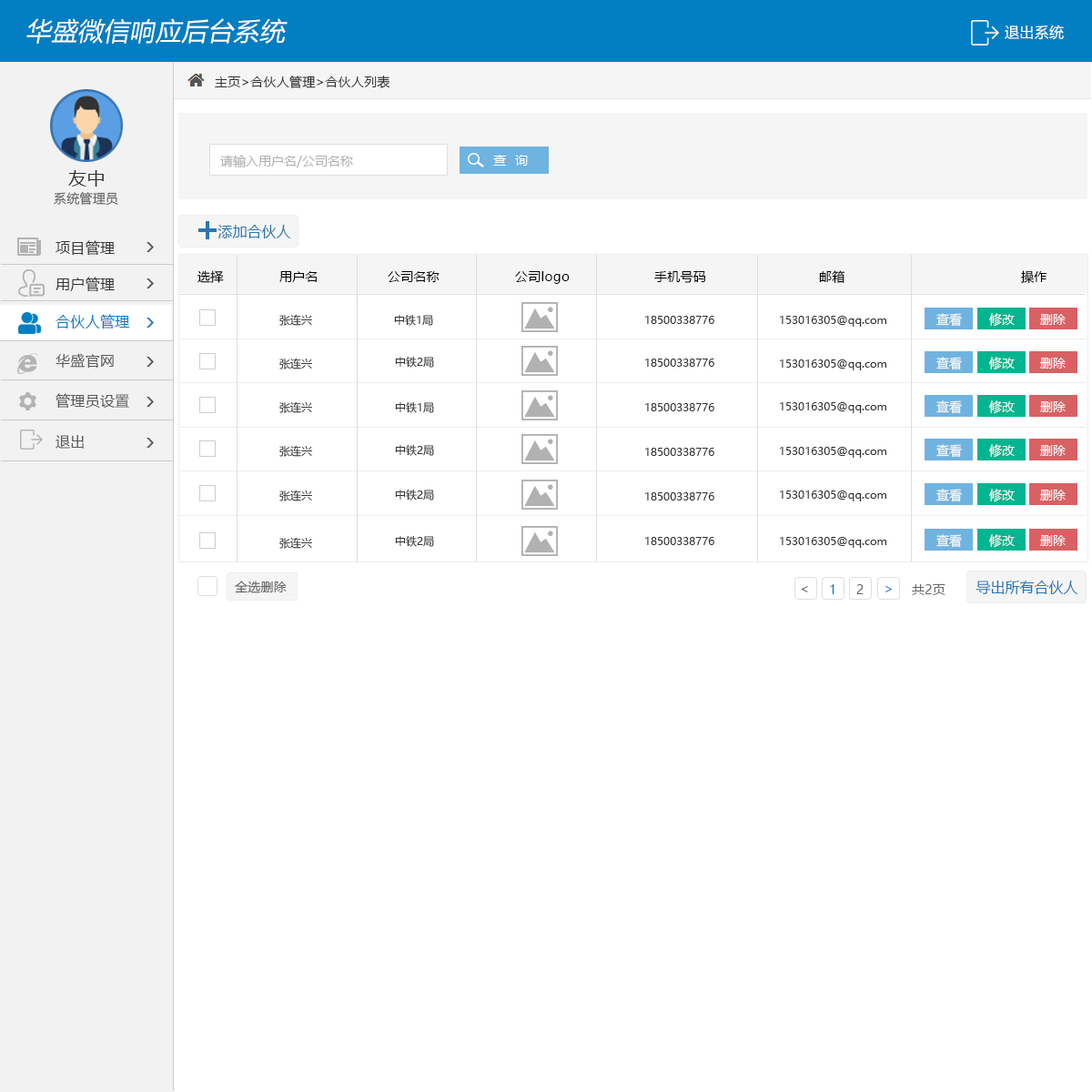
<style>
.page{position:relative;width:1092px;height:1092px;background:#ffffff}
.page>*{position:absolute;margin:0}
.t1{font:25.5px "MicrosoftYaHei";letter-spacing:0.02em;color:#ffffff;font-style:italic}
.t2{font:14.6px "MicrosoftYaHei";letter-spacing:0.02em;color:#ffffff}
.t3{font:12.7px "MicrosoftYaHei";letter-spacing:0.02em;color:#333333}
.t4{font:12.7px "MicrosoftYaHei";color:#b1b1b1}
.t5{font:18.2px "MicrosoftYaHei";letter-spacing:0.02em;color:#333333}
.t6{font:12.7px "MicrosoftYaHei";letter-spacing:0.02em;color:#666666}
.t7{font:14.6px "MicrosoftYaHei";color:#2977b3}
.t8{font:14.6px "MicrosoftYaHei";letter-spacing:0.02em;color:#333333}
.t9{font:12.7px "MicrosoftYaHei";letter-spacing:0.02em;color:#000000}
.t10{font:14.6px "MicrosoftYaHei";letter-spacing:0.02em;color:#017ec1}
.t11{font:10.9px "MicrosoftYaHei";color:#333333}
.t12{font:12.7px "MicrosoftYaHei";color:#f5f5f5}
.t13{font:14.6px "MicrosoftYaHei";letter-spacing:0.02em;color:#585858}
.t14{font:12.7px "MicrosoftYaHei";letter-spacing:0.02em;color:#017ec1}
.t15{font:13.1px "MicrosoftYaHei";letter-spacing:0.02em;color:#017ec1}
</style>
<div class="page">
<p class="t1" style="left:26px;top:18px;width:262px;height:26px">华盛微信响应后台系统</p>
<p class="t2" style="left:1005px;top:25px;width:59px;height:15px">退出系统</p>
<p class="t3" style="left:215px;top:76px;width:175px;height:12px">主页&gt;合伙人管理&gt;合伙人列表</p>
<p class="t4" style="left:220px;top:155px;width:133px;height:13px">请输入用户名/公司名称</p>
<p class="t5" style="left:68px;top:170px;width:36px;height:17px">友中</p>
<p class="t6" style="left:54px;top:192px;width:64px;height:14px">系统管理员</p>
<p class="t7" style="left:217px;top:225px;width:74px;height:13px">添加合伙人</p>
<p class="t8" style="left:56px;top:240px;width:59px;height:15px">项目管理</p>
<p class="t8" style="left:56px;top:277px;width:59px;height:14px">用户管理</p>
<p class="t9" style="left:197px;top:270px;width:27px;height:13px">选择</p>
<p class="t9" style="left:279px;top:271px;width:38px;height:11px">用户名</p>
<p class="t9" style="left:388px;top:271px;width:52px;height:11px">公司名称</p>
<p class="t9" style="left:515px;top:271px;width:55px;height:13px">公司logo</p>
<p class="t9" style="left:654px;top:270px;width:52px;height:13px">手机号码</p>
<p class="t9" style="left:819px;top:270px;width:26px;height:13px">邮箱</p>
<p class="t9" style="left:1021px;top:270px;width:26px;height:14px">操作</p>
<p class="t10" style="left:56px;top:314px;width:74px;height:15px">合伙人管理</p>
<p class="t11" style="left:279px;top:314px;width:33px;height:12px">张连兴</p>
<p class="t11" style="left:394px;top:314px;width:39px;height:12px">中铁1局</p>
<p class="t11" style="left:645px;top:316px;width:69px;height:8px">18500338776</p>
<p class="t11" style="left:780px;top:316px;width:106px;height:11px">153016305@qq.com</p>
<p class="t12" style="left:936px;top:313px;width:26px;height:14px">查看</p>
<p class="t12" style="left:989px;top:313px;width:26px;height:14px">修改</p>
<p class="t12" style="left:1040px;top:314px;width:26px;height:11px">删除</p>
<p class="t13" style="left:56px;top:353px;width:58px;height:15px">华盛官网</p>
<p class="t11" style="left:279px;top:358px;width:33px;height:11px">张连兴</p>
<p class="t11" style="left:395px;top:356px;width:39px;height:12px">中铁2局</p>
<p class="t11" style="left:645px;top:359px;width:69px;height:8px">18500338776</p>
<p class="t11" style="left:780px;top:359px;width:106px;height:11px">153016305@qq.com</p>
<p class="t12" style="left:936px;top:357px;width:26px;height:13px">查看</p>
<p class="t12" style="left:989px;top:357px;width:26px;height:13px">修改</p>
<p class="t12" style="left:1040px;top:358px;width:26px;height:11px">删除</p>
<p class="t13" style="left:56px;top:393px;width:73px;height:16px">管理员设置</p>
<p class="t11" style="left:279px;top:401px;width:33px;height:12px">张连兴</p>
<p class="t11" style="left:395px;top:401px;width:39px;height:12px">中铁1局</p>
<p class="t12" style="left:936px;top:400px;width:26px;height:14px">查看</p>
<p class="t12" style="left:989px;top:400px;width:26px;height:14px">修改</p>
<p class="t12" style="left:1040px;top:401px;width:26px;height:11px">删除</p>
<p class="t11" style="left:645px;top:403px;width:69px;height:8px">18500338776</p>
<p class="t11" style="left:780px;top:402px;width:106px;height:11px">153016305@qq.com</p>
<p class="t13" style="left:56px;top:435px;width:28px;height:14px">退出</p>
<p class="t11" style="left:279px;top:445px;width:33px;height:12px">张连兴</p>
<p class="t11" style="left:395px;top:444px;width:39px;height:12px">中铁2局</p>
<p class="t11" style="left:645px;top:448px;width:69px;height:8px">18500338776</p>
<p class="t11" style="left:780px;top:447px;width:106px;height:11px">153016305@qq.com</p>
<p class="t12" style="left:936px;top:444px;width:26px;height:14px">查看</p>
<p class="t12" style="left:989px;top:444px;width:26px;height:14px">修改</p>
<p class="t12" style="left:1040px;top:445px;width:26px;height:11px">删除</p>
<p class="t11" style="left:279px;top:490px;width:33px;height:11px">张连兴</p>
<p class="t11" style="left:395px;top:489px;width:39px;height:11px">中铁2局</p>
<p class="t11" style="left:645px;top:492px;width:69px;height:8px">18500338776</p>
<p class="t11" style="left:780px;top:490px;width:106px;height:11px">153016305@qq.com</p>
<p class="t12" style="left:936px;top:489px;width:26px;height:13px">查看</p>
<p class="t12" style="left:989px;top:489px;width:26px;height:13px">修改</p>
<p class="t12" style="left:1040px;top:490px;width:26px;height:10px">删除</p>
<p class="t11" style="left:279px;top:537px;width:33px;height:12px">张连兴</p>
<p class="t11" style="left:395px;top:535px;width:39px;height:12px">中铁2局</p>
<p class="t11" style="left:645px;top:537px;width:69px;height:8px">18500338776</p>
<p class="t11" style="left:780px;top:537px;width:106px;height:11px">153016305@qq.com</p>
<p class="t12" style="left:936px;top:534px;width:26px;height:14px">查看</p>
<p class="t12" style="left:989px;top:534px;width:26px;height:14px">修改</p>
<p class="t12" style="left:1040px;top:535px;width:26px;height:11px">删除</p>
<p class="t6" style="left:235px;top:581px;width:52px;height:12px">全选删除</p>
<p class="t7" style="left:976px;top:581px;width:102px;height:13px">导出所有合伙人</p>
<p class="t6" style="left:801px;top:586px;width:7px;height:6px">&lt;</p>
<p class="t14" style="left:830px;top:584px;width:4px;height:10px">1</p>
<p class="t6" style="left:856px;top:584px;width:8px;height:10px">2</p>
<p class="t15" style="left:885px;top:585px;width:7px;height:7px;rotate:180deg">&lt;</p>
<p class="t6" style="left:912px;top:584px;width:33px;height:11px">共2页</p>
</div>
